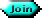
<style>
.page{position:relative;width:42px;height:18px;background:#ffffff}
.page>*{position:absolute;margin:0}
.t1{font:10px "LucidaSansUnicode";font-weight:bold}
</style>
<div class="page">
<p class="t1" style="left:10px;top:5px;width:22px;height:8px">Join</p>
</div>
